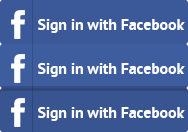
<style>
.page{position:relative;width:188px;height:132px;background:#3d5d9f}
.page>*{position:absolute;margin:0}
.t1{font:16px "PTSans-Bold";letter-spacing:-0.01em;color:#ffffff}
</style>
<div class="page">
<p class="t1" style="left:38px;top:19px;width:147px;height:14px">Sign in with Facebook</p>
<p class="t1" style="left:38px;top:63px;width:147px;height:14px">Sign in with Facebook</p>
<p class="t1" style="left:38px;top:107px;width:147px;height:14px">Sign in with Facebook</p>
</div>
